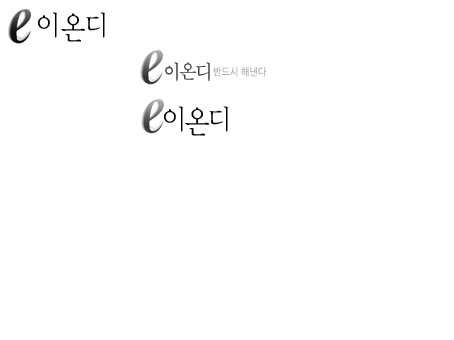
<style>
.page{position:relative;width:454px;height:340px;background:#ffffff}
.page>*{position:absolute;margin:0}
.t1{font:30px "YDIYMjO220";color:#000000;scale:0.9 1}
.t2{font:20px "BatangChe";letter-spacing:-0.1em;color:#434343;scale:0.9 1}
.t3{font:10px "NanumGothic";color:#acacac;scale:0.9 1}
</style>
<div class="page">
<p class="t1" style="left:38px;top:12px;width:19px;height:26px">이</p>
<p class="t1" style="left:61px;top:13px;width:24px;height:29px">온</p>
<p class="t1" style="left:86px;top:12px;width:19px;height:26px">디</p>
<p class="t2" style="left:165px;top:62px;width:45px;height:20px">이온디</p>
<p class="t3" style="left:213px;top:67px;width:54px;height:10px">반드시 해낸다</p>
<p class="t1" style="left:164px;top:106px;width:19px;height:26px">이</p>
<p class="t1" style="left:185px;top:107px;width:24px;height:29px">온</p>
<p class="t1" style="left:209px;top:106px;width:19px;height:26px">디</p>
</div>
